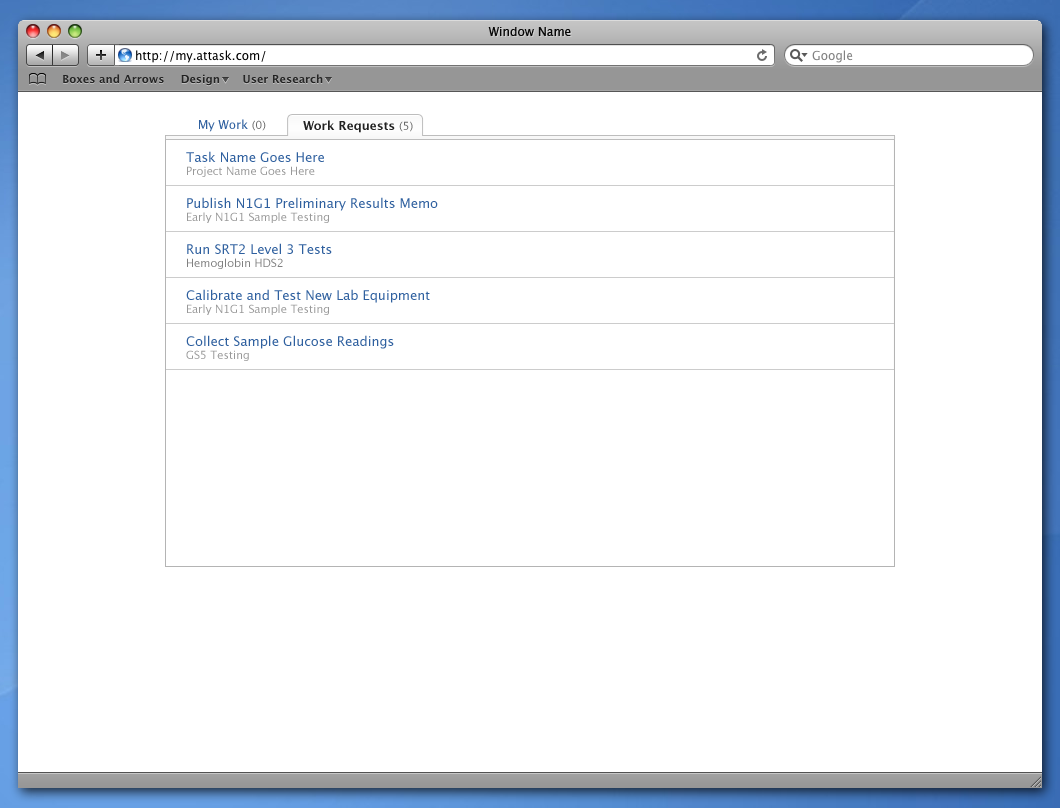
<style>
.page{position:relative;width:1060px;height:808px;background:#ffffff}
.page>*{position:absolute;margin:0}
.t1{font:12px "LucidaGrande";color:#080808}
.t2{font:12px "LucidaGrande";color:#2f609f}
.t3{font:11px "LucidaGrande";color:#686868}
.t4{font:12px "LucidaGrande-Bold";color:#222222}
.t5{font:11px/13px "LucidaGrande";color:#999999}
.t6{font:13px/14px "LucidaGrande";color:#2f609f}
.t7{font:11px/13px "LucidaGrande";color:#808080}
</style>
<div class="page">
<p class="t1" style="left:488px;top:27px;width:83px;height:9px">Window Name</p>
<p class="t2" style="left:199px;top:119px;width:67px;height:13px">My Work <span class="t3">(0)</span></p>
<p class="t4" style="left:303px;top:120px;width:110px;height:13px">Work Requests <span class="t3">(5)</span></p>
<p class="t5" style="left:186px;top:151px;width:138px;height:26px"><span class="t6">Task Name Goes Here<br></span>Project Name Goes Here</p>
<p class="t6" style="left:187px;top:197px;width:251px;height:26px">Publish N1G1 Preliminary Results Memo<br><span class="t5">Early N1G1 Sample Testing</span></p>
<p class="t6" style="left:187px;top:243px;width:145px;height:26px">Run SRT2 Level 3 Tests<br><span class="t7">Hemoglobin HDS2</span></p>
<p class="t6" style="left:186px;top:289px;width:244px;height:26px">Calibrate and Test New Lab Equipment<br><span class="t5">Early N1G1 Sample Testing</span></p>
<p class="t6" style="left:186px;top:335px;width:208px;height:26px">Collect Sample Glucose Readings<br><span class="t5">GS5 Testing</span></p>
</div>
